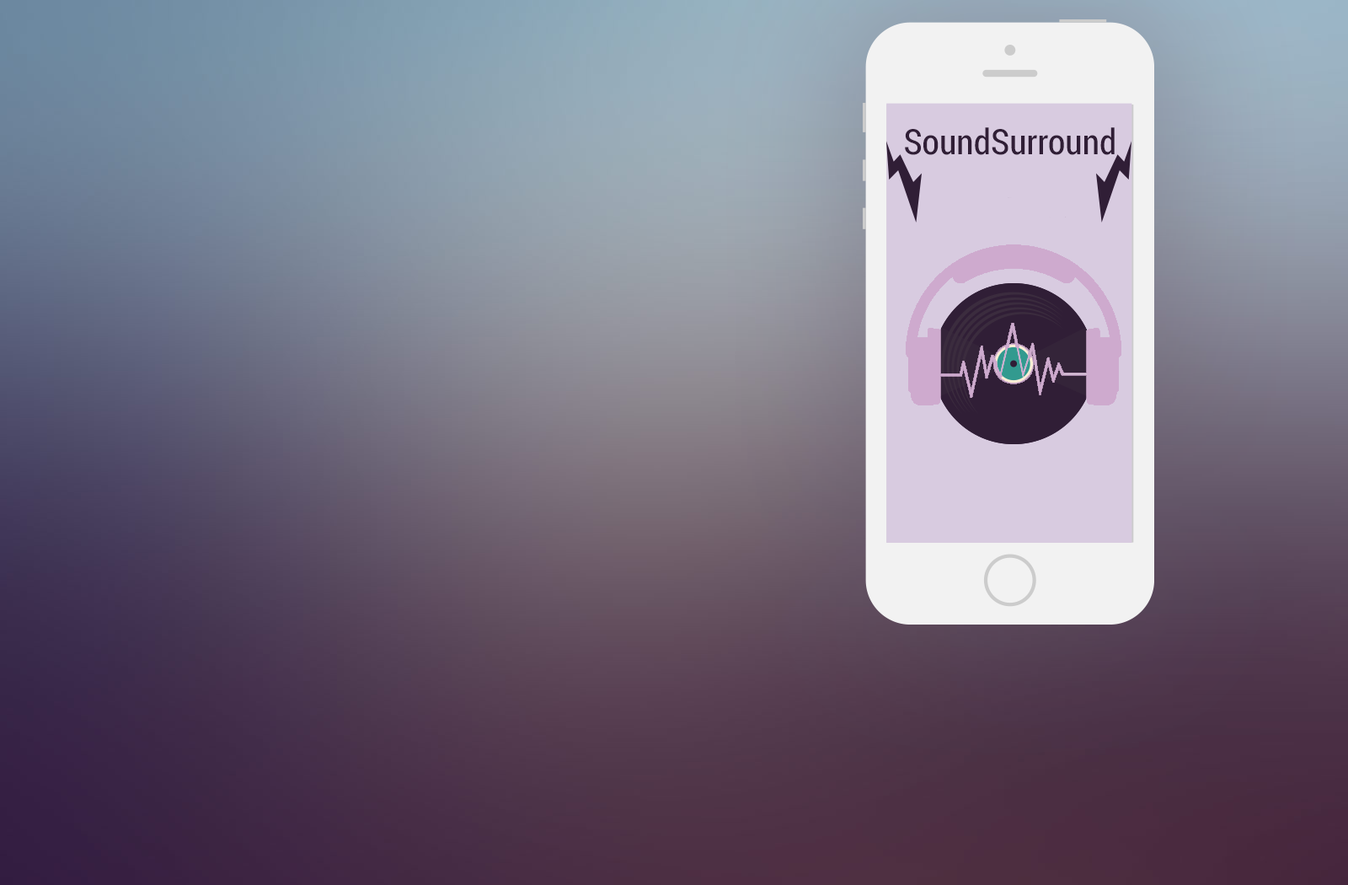
<style>
.page{position:relative;width:1348px;height:885px}
.page>*{position:absolute;margin:0}
.t1{font:35.3px "RobotoCondensed-Regular";color:#301e36}
</style>
<div class="page">
<p class="t1" style="left:905px;top:127px;width:210px;height:28px">SoundSurround</p>
</div>
